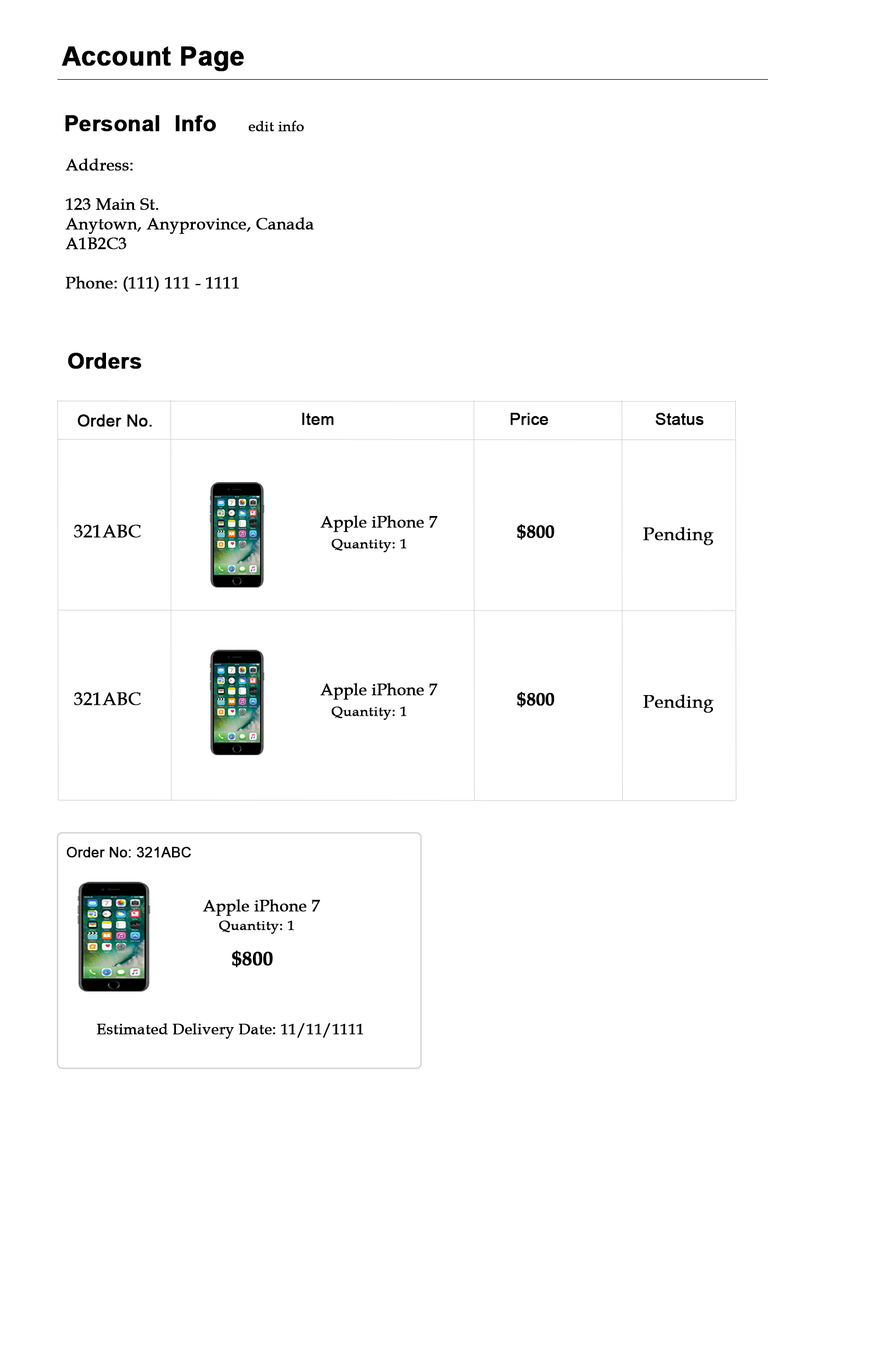
<style>
.page{position:relative;width:874px;height:1365px;background:#ffffff}
.page>*{position:absolute;margin:0}
.t1{font:26.2px "Arial-BoldMT";color:#000000;font-weight:bold}
.t2{font:21.8px "Arial-BoldMT";color:#000000;font-weight:bold}
.t3{font:14.2px "BookAntiqua";color:#000000;font-weight:bold}
.t4{font:16.4px "BookAntiqua";color:#000000;font-weight:bold}
.t5{font:16.4px "ArialMT";color:#000000;font-weight:bold}
.t6{font:18px "BookAntiqua";color:#000000;font-weight:bold}
.t7{font:18px "BookAntiqua-Bold";color:#000000;font-weight:bold}
.t8{font:13.6px "BookAntiqua";color:#000000;font-weight:bold;scale:1.06 1}
.t9{font:14.2px "ArialMT";color:#000000;font-weight:bold}
.t10{font:19.7px "BookAntiqua-Bold";color:#000000;font-weight:bold}
.t11{font:15.3px "BookAntiqua";color:#000000;font-weight:bold}
</style>
<div class="page">
<p class="t1" style="left:62px;top:46px;width:182px;height:26px">Account Page</p>
<p class="t2" style="left:66px;top:115px;width:150px;height:17px">Personal  Info</p>
<p class="t3" style="left:248px;top:121px;width:56px;height:11px">edit info</p>
<p class="t4" style="left:66px;top:158px;width:248px;height:134px">Address:<br><br>123 Main St. <br>Anytown, Anyprovince, Canada<br>A1B2C3<br><br>Phone: (111) 111 - 1111</p>
<p class="t2" style="left:68px;top:353px;width:73px;height:16px">Orders</p>
<p class="t5" style="left:302px;top:413px;width:32px;height:12px">Item</p>
<p class="t5" style="left:510px;top:413px;width:38px;height:12px">Price</p>
<p class="t5" style="left:655px;top:413px;width:48px;height:12px">Status</p>
<p class="t5" style="left:78px;top:414px;width:74px;height:13px">Order No.</p>
<p class="t4" style="left:320px;top:515px;width:117px;height:17px">Apple iPhone 7</p>
<p class="t6" style="left:74px;top:525px;width:67px;height:13px">321ABC</p>
<p class="t7" style="left:517px;top:524px;width:37px;height:16px">$800</p>
<p class="t6" style="left:643px;top:527px;width:71px;height:18px">Pending</p>
<p class="t8" style="left:331px;top:539px;width:75px;height:14px">Quantity: 1</p>
<p class="t4" style="left:320px;top:683px;width:117px;height:17px">Apple iPhone 7</p>
<p class="t6" style="left:74px;top:692px;width:67px;height:13px">321ABC</p>
<p class="t7" style="left:517px;top:692px;width:37px;height:16px">$800</p>
<p class="t6" style="left:643px;top:695px;width:71px;height:18px">Pending</p>
<p class="t8" style="left:331px;top:707px;width:75px;height:13px">Quantity: 1</p>
<p class="t9" style="left:67px;top:847px;width:124px;height:11px">Order No: 321ABC</p>
<p class="t4" style="left:203px;top:899px;width:117px;height:17px">Apple iPhone 7</p>
<p class="t8" style="left:219px;top:921px;width:75px;height:13px">Quantity: 1</p>
<p class="t10" style="left:232px;top:951px;width:40px;height:16px">$800</p>
<p class="t11" style="left:97px;top:1023px;width:266px;height:16px">Estimated Delivery Date: 11/11/1111</p>
</div>
